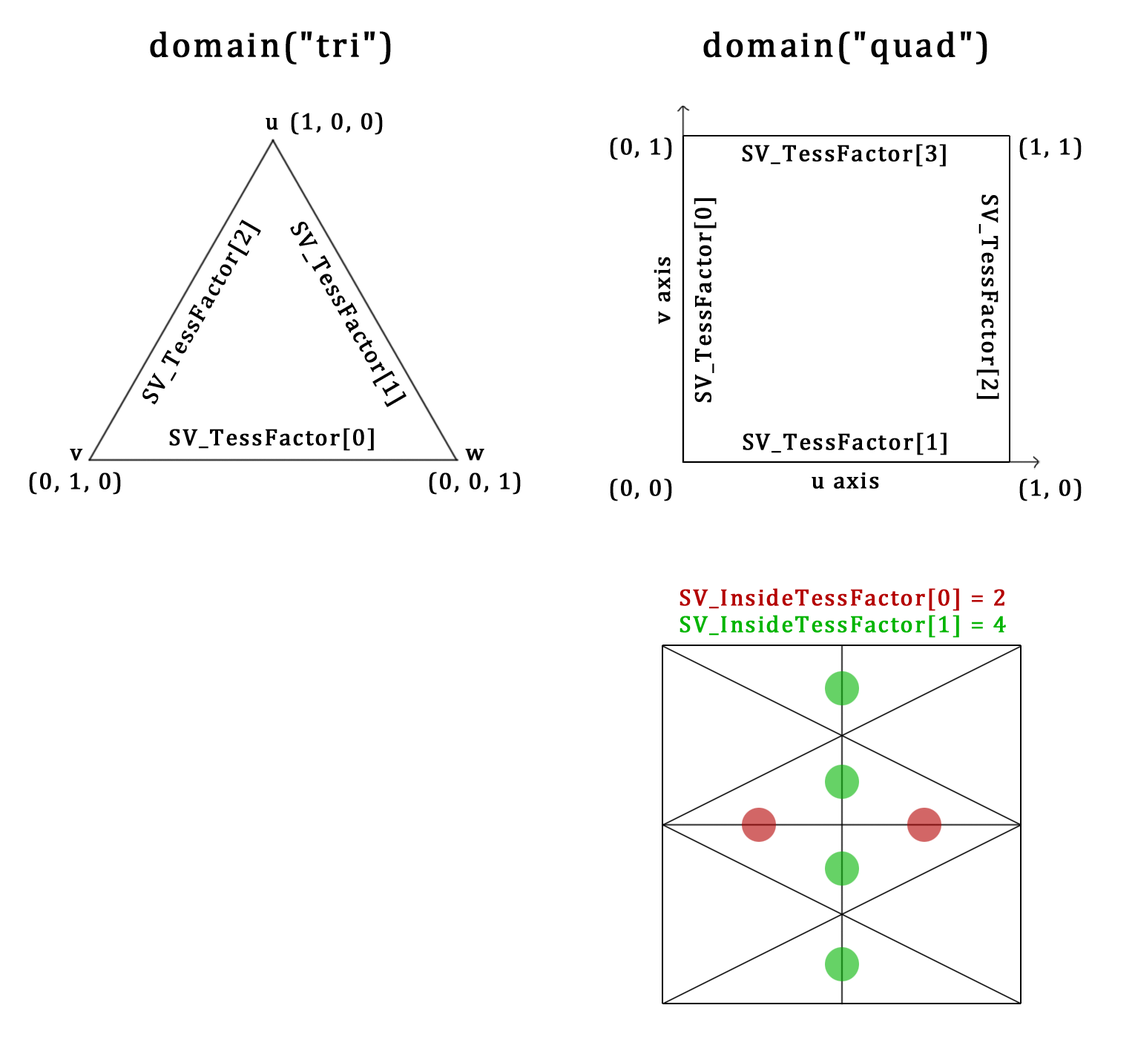
<style>
.page{position:relative;width:1135px;height:1051px;background:#ffffff}
.page>*{position:absolute;margin:0}
.t1{font:35.6px "Cambria";letter-spacing:0.06em;color:#000000;font-weight:bold}
.t2{font:23.7px "Cambria";letter-spacing:0.06em;color:#000000;font-weight:bold}
.t3{font:23.7px/26.7px "Cambria";letter-spacing:0.06em;color:#b40000;font-weight:bold}
.t4{font:23.7px/26.7px "Cambria";letter-spacing:0.06em;color:#01b400;font-weight:bold}
</style>
<div class="page">
<p class="t1" style="left:150px;top:31px;width:241px;height:34px">domain("tri")</p>
<p class="t1" style="left:703px;top:31px;width:284px;height:34px">domain("quad")</p>
<p class="t2" style="left:291px;top:112px;width:92px;height:23px">(1, 0, 0)</p>
<p class="t2" style="left:266px;top:118px;width:12px;height:12px">u</p>
<p class="t2" style="left:610px;top:137px;width:62px;height:23px">(0, 1)</p>
<p class="t2" style="left:1019px;top:137px;width:62px;height:23px">(1, 1)</p>
<p class="t2" style="left:742px;top:144px;width:204px;height:23px">SV_TessFactor[3]</p>
<p class="t2" style="left:976px;top:194px;width:23px;height:205px;rotate:90deg">SV_TessFactor[2]</p>
<p class="t2" style="left:693px;top:198px;width:23px;height:205px;rotate:-90deg">SV_TessFactor[0]</p>
<p class="t2" style="left:142px;top:220px;width:119px;height:185px;rotate:-60deg">SV_TessFactor[2]</p>
<p class="t2" style="left:290px;top:222px;width:116px;height:185px;rotate:60deg">SV_TessFactor[1]</p>
<p class="t2" style="left:653px;top:257px;width:17px;height:67px;rotate:-90deg">v axis</p>
<p class="t2" style="left:169px;top:428px;width:205px;height:23px">SV_TessFactor[0]</p>
<p class="t2" style="left:742px;top:432px;width:204px;height:23px">SV_TessFactor[1]</p>
<p class="t2" style="left:70px;top:449px;width:13px;height:12px">v</p>
<p class="t2" style="left:465px;top:449px;width:19px;height:12px">w</p>
<p class="t2" style="left:29px;top:472px;width:92px;height:23px">(0, 1, 0)</p>
<p class="t2" style="left:429px;top:472px;width:92px;height:23px">(0, 0, 1)</p>
<p class="t2" style="left:811px;top:472px;width:68px;height:17px">u axis</p>
<p class="t2" style="left:610px;top:478px;width:62px;height:23px">(0, 0)</p>
<p class="t2" style="left:1019px;top:478px;width:62px;height:23px">(1, 0)</p>
<p class="t3" style="left:679px;top:588px;width:327px;height:50px">SV_InsideTessFactor[0] = 2<br><span class="t4">SV_InsideTessFactor[1] = 4</span></p>
</div>
